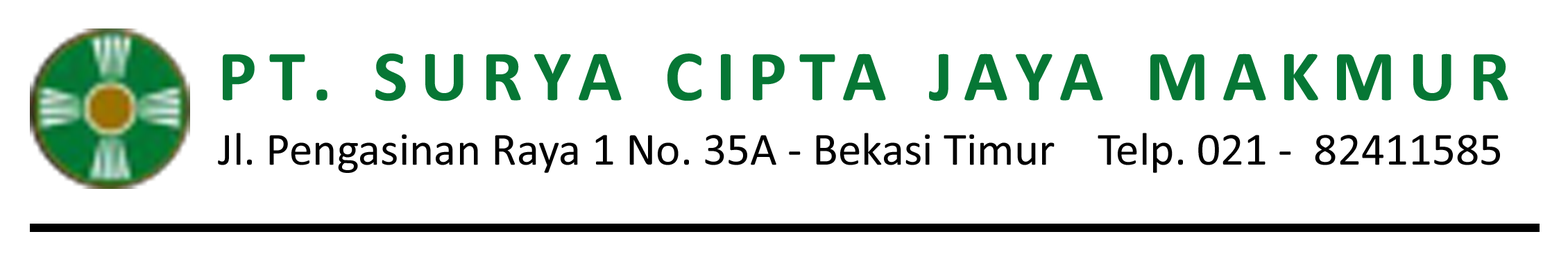
<style>
.page{position:relative;width:1568px;height:266px;background:#ffffff}
.page>*{position:absolute;margin:0}
.t1{font:72.3px "Calibri-Bold";letter-spacing:0.175em;color:#067735}
.t2{font:46.3px "Calibri";color:#000000}
</style>
<div class="page">
<p class="t1" style="left:223px;top:53px;width:1285px;height:48px">PT. SURYA CIPTA JAYA MAKMUR</p>
<p class="t2" style="left:218px;top:133px;width:1282px;height:40px">Jl. Pengasinan Raya 1 No. 35A - Bekasi Timur    Telp. 021 -  82411585</p>
</div>
